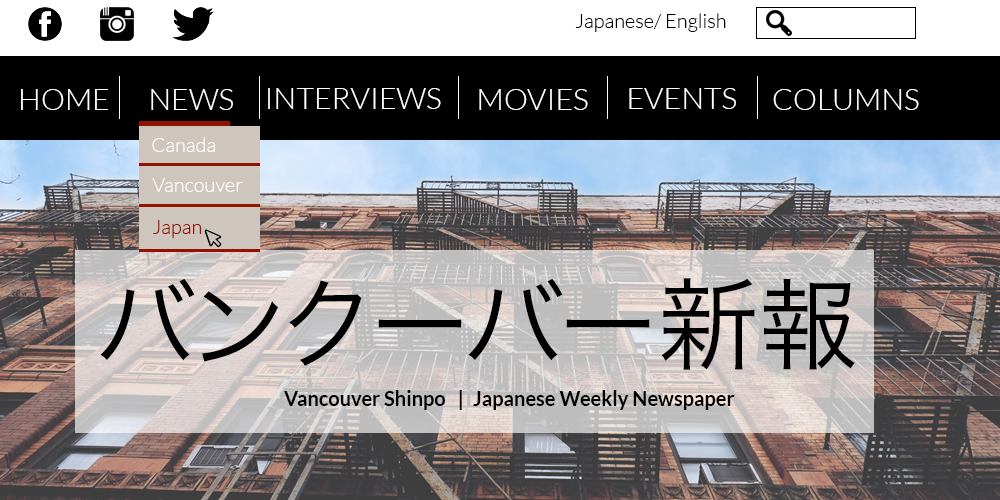
<style>
.page{position:relative;width:1000px;height:500px}
.page>*{position:absolute;margin:0}
.t1{font:20px "Lato-Light";color:#000000}
.t2{font:30px "Lato-Light";color:#ffffff}
.t3{font:20px "Lato-Light";color:#fffefe}
.t4{font:20px "Lato-Light";color:#ffffff}
.t5{font:20px "Lato-Light";color:#931100}
.t6{font:100px "HiraKakuProN-W3";color:#000000}
.t7{font:20px "Lato-Bold";color:#000000}
</style>
<div class="page">
<p class="t1" style="left:575px;top:13px;width:151px;height:19px">Japanese/ English</p>
<p class="t2" style="left:21px;top:89px;width:87px;height:21px">HOME</p>
<p class="t2" style="left:151px;top:89px;width:82px;height:21px">NEWS</p>
<p class="t2" style="left:268px;top:88px;width:173px;height:21px">INTERVIEWS</p>
<p class="t2" style="left:479px;top:89px;width:109px;height:21px">MOVIES</p>
<p class="t2" style="left:629px;top:88px;width:107px;height:21px">EVENTS</p>
<p class="t2" style="left:773px;top:89px;width:146px;height:21px">COLUMNS</p>
<p class="t3" style="left:152px;top:137px;width:63px;height:15px">Canada</p>
<p class="t4" style="left:152px;top:178px;width:91px;height:14px">Vancouver</p>
<p class="t5" style="left:153px;top:220px;width:49px;height:18px">Japan</p>
<p class="t6" style="left:100px;top:278px;width:755px;height:92px">バンクーバー新報</p>
<p class="t7" style="left:284px;top:390px;width:161px;height:20px">Vancouver Shinpo</p>
<p class="t7" style="left:459px;top:390px;width:3px;height:20px">|</p>
<p class="t7" style="left:473px;top:390px;width:262px;height:20px">Japanese Weekly Newspaper</p>
</div>
